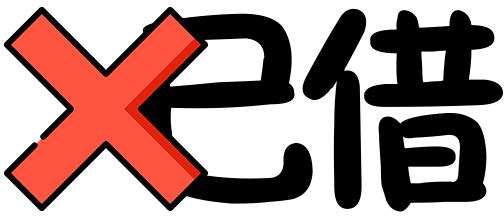
<style>
.page{position:relative;width:504px;height:216px;background:#ffffff}
.page>*{position:absolute;margin:0}
.t1{font:225px "FZSEJW--GB1-0";letter-spacing:-0.205em;color:#000000}
</style>
<div class="page">
<p class="t1" style="left:142px;top:8px;width:361px;height:204px">已借</p>
</div>
